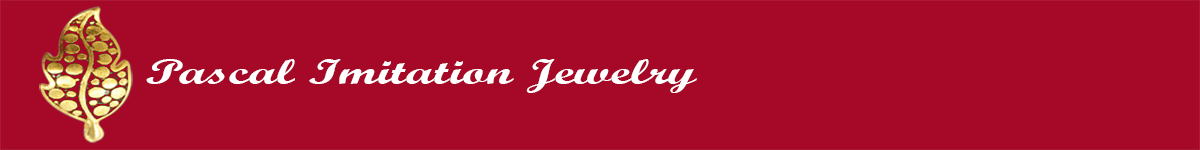
<style>
.page{position:relative;width:1200px;height:150px;background:#a60928}
.page>*{position:absolute;margin:0}
.t1{font:36px "ScriptMTBold";color:#ffffff;scale:1.51 1}
</style>
<div class="page">
<p class="t1" style="left:146px;top:59px;width:551px;height:34px">Pascal Imitation Jewelry</p>
</div>
